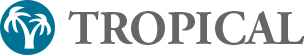
<style>
.page{position:relative;width:305px;height:55px;background:#ffffff}
.page>*{position:absolute;margin:0}
.t1{font:48px "AGaramondPro-Bold";color:#666666}
</style>
<div class="page">
<p class="t1" style="left:68px;top:10px;width:237px;height:35px">TROPICAL</p>
</div>
